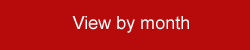
<style>
.page{position:relative;width:250px;height:50px;background:#b70a0a}
.page>*{position:absolute;margin:0}
.t1{font:18px "ArialMT";color:#ffffff}
</style>
<div class="page">
<p class="t1" style="left:72px;top:16px;width:117px;height:17px">View by month</p>
</div>
